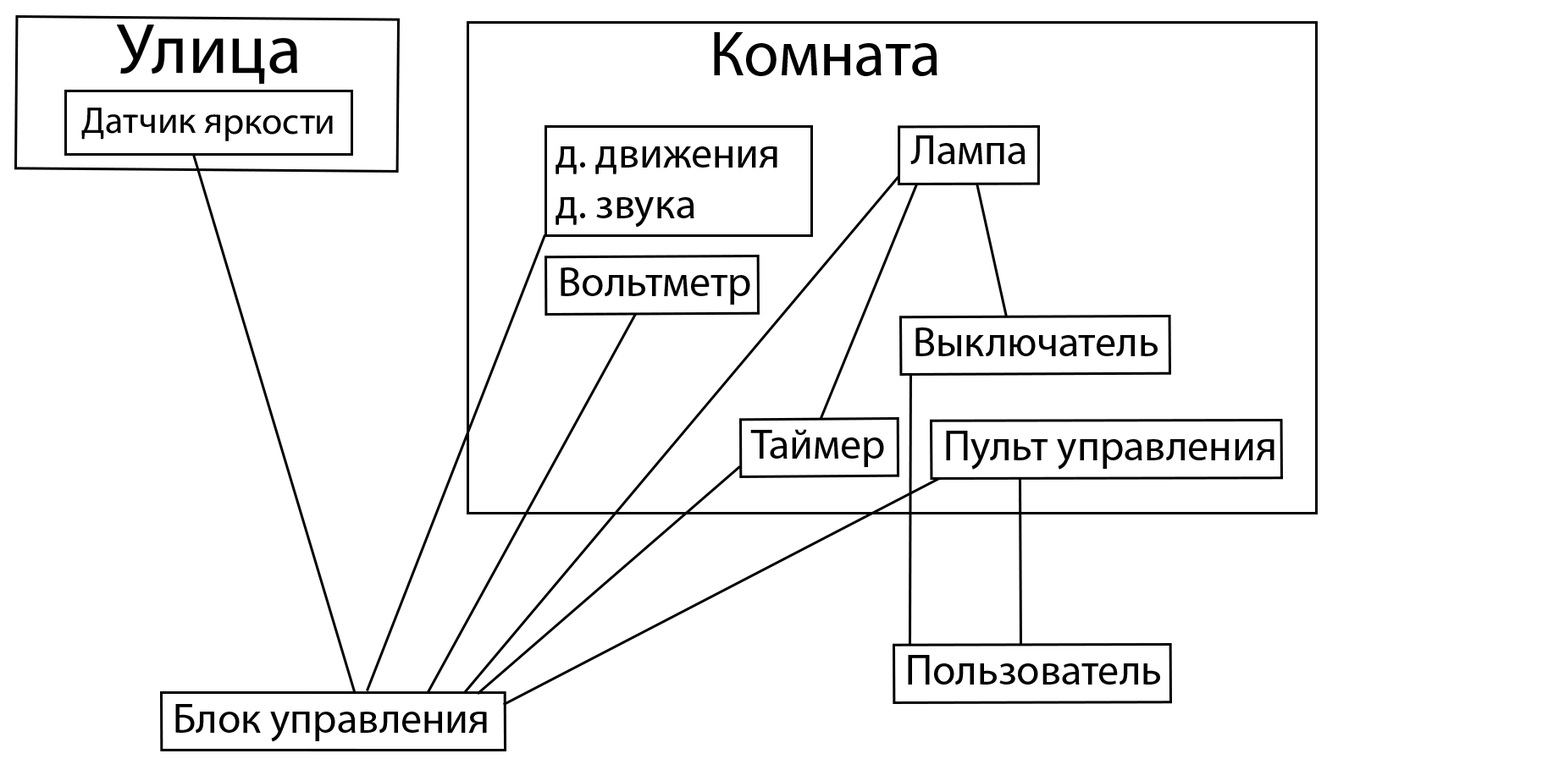
<style>
.page{position:relative;width:1548px;height:770px;background:#ffffff}
.page>*{position:absolute;margin:0}
.t1{font:63.9px "MyriadPro-Regular";color:#000000}
.t2{font:37.5px "MyriadPro-Regular";color:#000000}
.t3{font:42.4px "MyriadPro-Regular";color:#000000}
.t4{font:42.7px "MyriadPro-Regular";color:#000000}
</style>
<div class="page">
<p class="t1" style="left:714px;top:32px;width:223px;height:44px">Комната</p>
<p class="t2" style="left:81px;top:108px;width:252px;height:33px">Датчик яркости</p>
<p class="t3" style="left:910px;top:135px;width:115px;height:29px">Лампа</p>
<p class="t3" style="left:555px;top:146px;width:222px;height:82px">д. движения<br>д. звука</p>
<p class="t3" style="left:560px;top:268px;width:190px;height:37px">Вольтметр</p>
<p class="t3" style="left:915px;top:328px;width:242px;height:28px">Выключатель</p>
<p class="t3" style="left:750px;top:429px;width:134px;height:38px">Таймер</p>
<p class="t4" style="left:946px;top:431px;width:328px;height:39px">Пульт управления</p>
<p class="t4" style="left:908px;top:655px;width:252px;height:30px">Пользователь</p>
<p class="t3" style="left:175px;top:704px;width:312px;height:39px">Блок управления</p>
</div>
